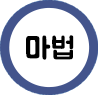
<style>
.page{position:relative;width:98px;height:95px;background:#ffffff}
.page>*{position:absolute;margin:0}
.t1{font:30px "BMJUA";color:#000000}
</style>
<div class="page">
<p class="t1" style="left:26px;top:35px;width:48px;height:25px">마법</p>
</div>
